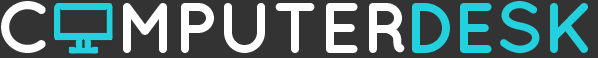
<style>
.page{position:relative;width:598px;height:58px;background:#333333}
.page>*{position:absolute;margin:0}
.t1{font:72px "QuicksandBold-Regular";color:#ffffff}
.t2{font:72px "QuicksandBold-Regular";color:#23d1de}
</style>
<div class="page">
<p class="t1" style="left:1px;top:1px;width:404px;height:52px">C   MPUTER</p>
<p class="t2" style="left:412px;top:1px;width:176px;height:52px">DESK</p>
</div>
